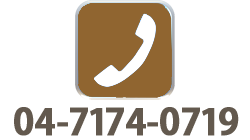
<style>
.page{position:relative;width:250px;height:140px;background:#ffffff}
.page>*{position:absolute;margin:0}
.t1{font:36px "KozGoPro-Bold";color:#63594e;font-weight:bold}
</style>
<div class="page">
<p class="t1" style="left:14px;top:107px;width:225px;height:29px">04-7174-0719</p>
</div>
